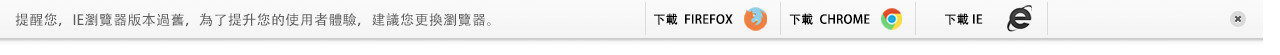
<style>
.page{position:relative;width:1280px;height:55px;background:#ffffff}
.page>*{position:absolute;margin:0}
.t1{font:14px "AdobeHeitiStd-Regular";letter-spacing:0.025em;color:#5e5e5e;text-transform:uppercase}
.t2{font:12.2px "AdobeHeitiStd-Regular";letter-spacing:0.025em;color:#000000;text-transform:uppercase}
</style>
<div class="page">
<p class="t1" style="left:15px;top:13px;width:476px;height:14px">提醒您，ie瀏覽器版本過舊，為了提升您的使用者體驗，建議您更換瀏覽器。</p>
<p class="t2" style="left:654px;top:13px;width:79px;height:12px">下載  firefox</p>
<p class="t2" style="left:789px;top:13px;width:81px;height:12px">下載  CHROME</p>
<p class="t2" style="left:945px;top:13px;width:38px;height:12px">下載 ie</p>
</div>
